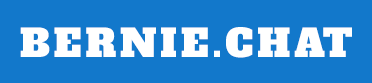
<style>
.page{position:relative;width:372px;height:83px;background:#1278cb}
.page>*{position:absolute;margin:0}
.t1{font:38px "AlfaSlabOne-Regular";letter-spacing:0.1em;color:#ffffff}
</style>
<div class="page">
<p class="t1" style="left:20px;top:27px;width:332px;height:31px">BERNIE.CHAT</p>
</div>
